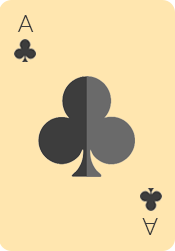
<style>
.page{position:relative;width:175px;height:251px;background:#ffe6af}
.page>*{position:absolute;margin:0}
.t1{font:23.5px "Lato-Light";color:#3d3d3d}
</style>
<div class="page">
<p class="t1" style="left:17px;top:15px;width:17px;height:17px">A</p>
<p class="t1" style="left:142px;top:218px;width:16px;height:17px;rotate:180deg">A</p>
</div>
